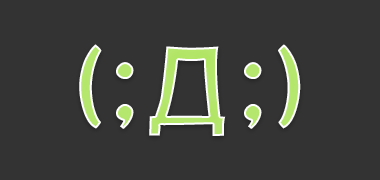
<style>
.page{position:relative;width:380px;height:180px;background:#333333}
.page>*{position:absolute;margin:0}
.t1{font:100px "KFhimaji"}
</style>
<div class="page">
<p class="t1" style="left:79px;top:44px;width:222px;height:92px">(;Д;)</p>
</div>
